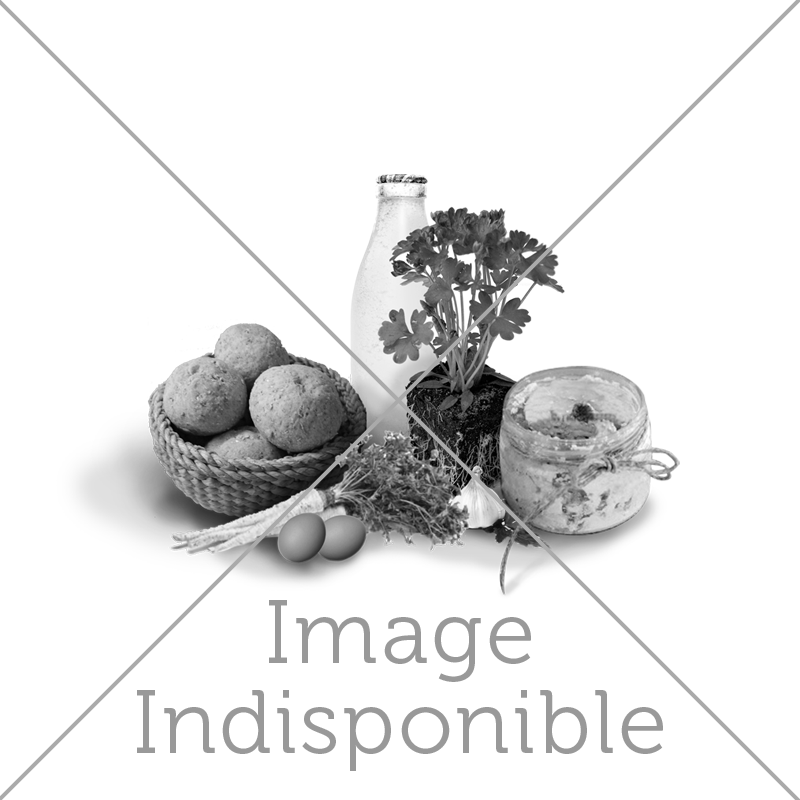
<style>
.page{position:relative;width:800px;height:800px;background:#ffffff}
.page>*{position:absolute;margin:0}
.t1{font:90px/90px "Museo-300";letter-spacing:0.03em;color:#999999}
</style>
<div class="page">
<p class="t1" style="left:137px;top:600px;width:526px;height:171px;text-align:center">Image <br>Indisponible</p>
</div>
